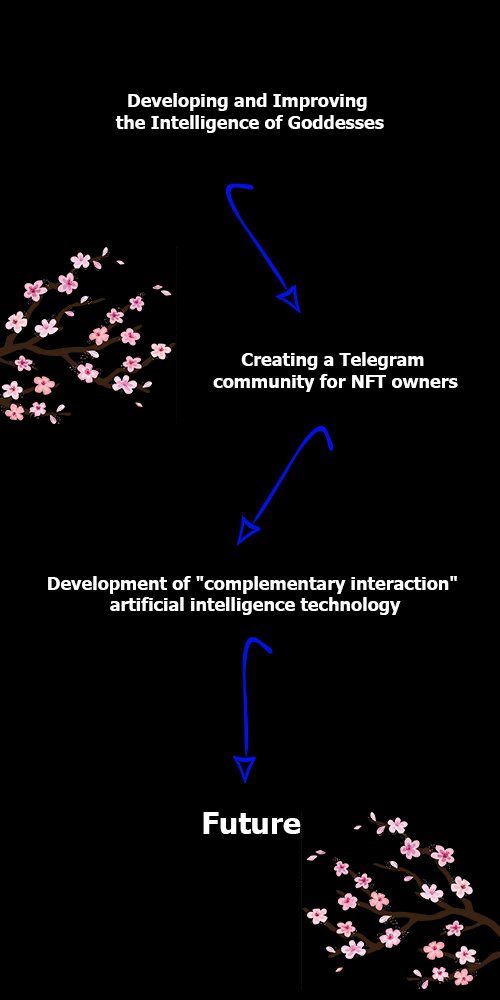
<style>
.page{position:relative;width:500px;height:1000px;background:#000000}
.page>*{position:absolute;margin:0}
.t1{font:18px "Tahoma-Bold";color:#ffffff}
.t2{font:30px "Tahoma-Bold";color:#ffffff}
</style>
<div class="page">
<p class="t1" style="left:115px;top:93px;width:269px;height:40px;text-align:center">Developing and Improving <br>the Intelligence of Goddesses</p>
<p class="t1" style="left:213px;top:352px;width:245px;height:40px;text-align:center">Creating a Telegram <br>community for NFT owners</p>
<p class="t1" style="left:48px;top:576px;width:409px;height:39px;text-align:center">Development of "complementary interaction" <br>artificial intelligence technology</p>
<p class="t2" style="left:203px;top:812px;width:98px;height:22px">Future</p>
</div>
